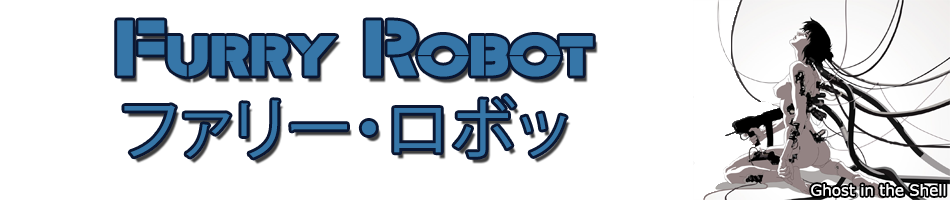
<style>
.page{position:relative;width:950px;height:200px;background:#ffffff}
.page>*{position:absolute;margin:0}
.t1{font:83.3px "TemplettWideBold";color:#3676a8}
.t2{font:66.7px "KozGoPr6N-Regular";color:#3676a8}
.t3{font:15.2px "Verdana";color:#ffffff}
</style>
<div class="page">
<p class="t1" style="left:117px;top:20px;width:476px;height:57px">Furry Robot</p>
<p class="t2" style="left:124px;top:96px;width:442px;height:62px">ファリー・ロボット</p>
<p class="t3" style="left:811px;top:184px;width:135px;height:12px">Ghost in the Shell</p>
</div>
